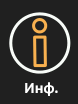
<style>
.page{position:relative;width:78px;height:104px;background:#202020}
.page>*{position:absolute;margin:0}
.t1{font:12px "Calibri-Bold";color:#ffffff}
</style>
<div class="page">
<p class="t1" style="left:25px;top:82px;width:33px;height:14px">Инф.</p>
</div>
